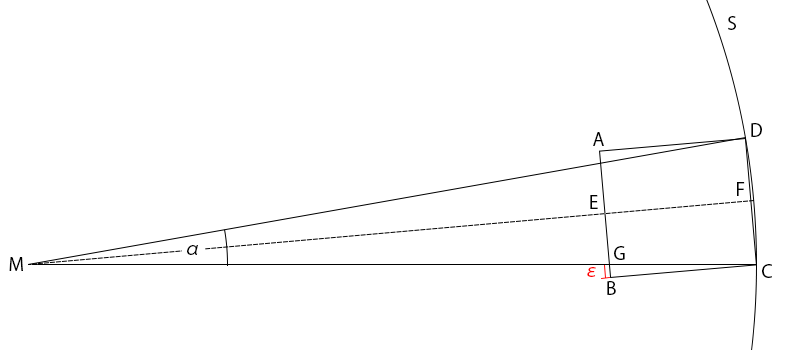
<style>
.page{position:relative;width:800px;height:350px;background:#ffffff}
.page>*{position:absolute;margin:0}
.t1{font:18px "KozGoPr6N-Regular";color:#000000}
.t2{font:18px "KozGoPr6N-Regular";color:#ff0000}
</style>
<div class="page">
<p class="t1" style="left:728px;top:16px;width:8px;height:14px">S</p>
<p class="t1" style="left:751px;top:123px;width:11px;height:14px">D</p>
<p class="t1" style="left:593px;top:132px;width:11px;height:14px">A</p>
<p class="t1" style="left:737px;top:182px;width:8px;height:14px">F</p>
<p class="t1" style="left:590px;top:195px;width:8px;height:14px">E</p>
<p class="t1" style="left:187px;top:245px;width:11px;height:10px">α</p>
<p class="t1" style="left:614px;top:246px;width:11px;height:14px">G</p>
<p class="t1" style="left:9px;top:257px;width:14px;height:14px">M</p>
<p class="t2" style="left:587px;top:267px;width:9px;height:10px">ε</p>
<p class="t1" style="left:762px;top:264px;width:10px;height:14px">C</p>
<p class="t1" style="left:607px;top:281px;width:9px;height:14px">B</p>
</div>
